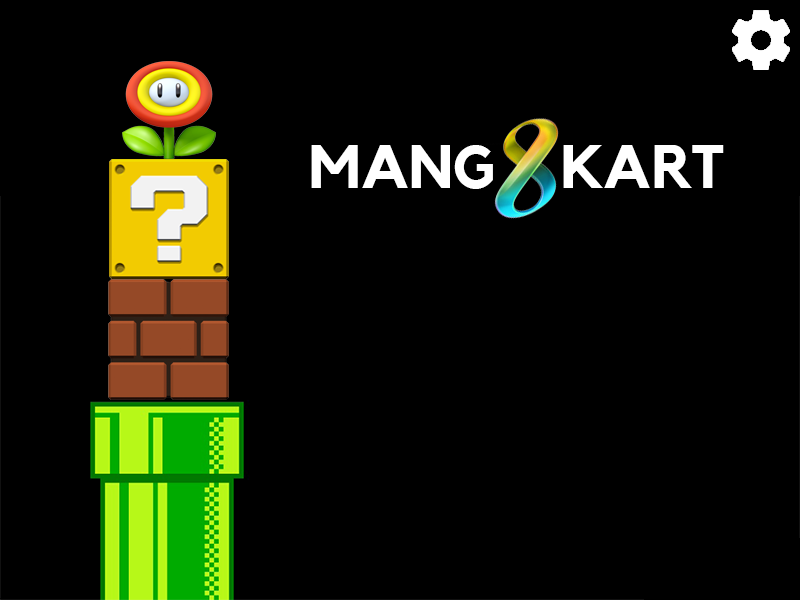
<style>
.page{position:relative;width:800px;height:600px;background:#000000}
.page>*{position:absolute;margin:0}
.t1{font:60px "Kollektif-Bold";color:#ffffff}
</style>
<div class="page">
<p class="t1" style="left:311px;top:145px;width:413px;height:44px">MANG    KART</p>
</div>
